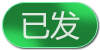
<style>
.page{position:relative;width:100px;height:50px}
.page>*{position:absolute;margin:0}
.t1{font:30px "MicrosoftYaHei";color:#dde8df}
</style>
<div class="page">
<p class="t1" style="left:22px;top:11px;width:58px;height:29px">已发</p>
</div>
